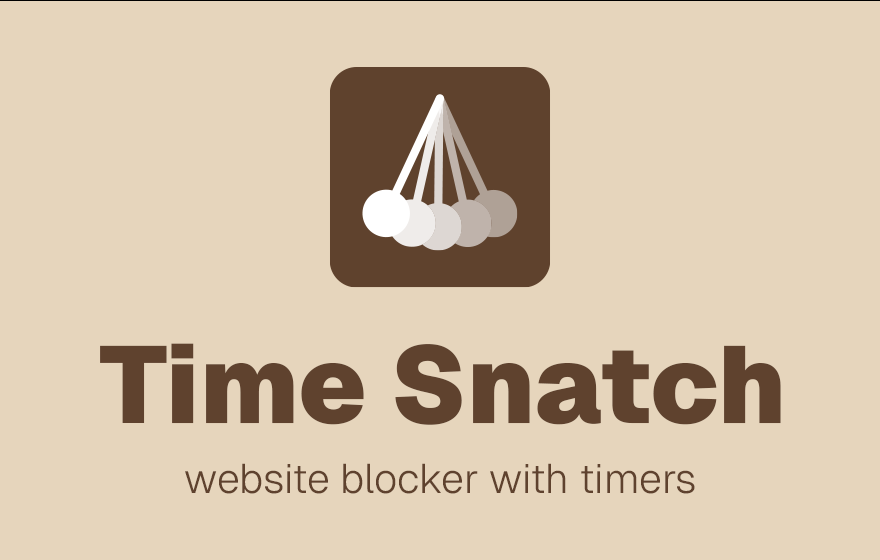
<style>
.page{position:relative;width:880px;height:560px;background:#e6d5bc}
.page>*{position:absolute;margin:0}
.t1{font:108.7px "Geist-Black";color:#5f422e}
.t2{font:41.2px "Geist-Light";color:#5f422e}
</style>
<div class="page">
<p class="t1" style="left:100px;top:343px;width:681px;height:82px">Time Snatch</p>
<p class="t2" style="left:185px;top:463px;width:510px;height:31px">website blocker with timers</p>
</div>
